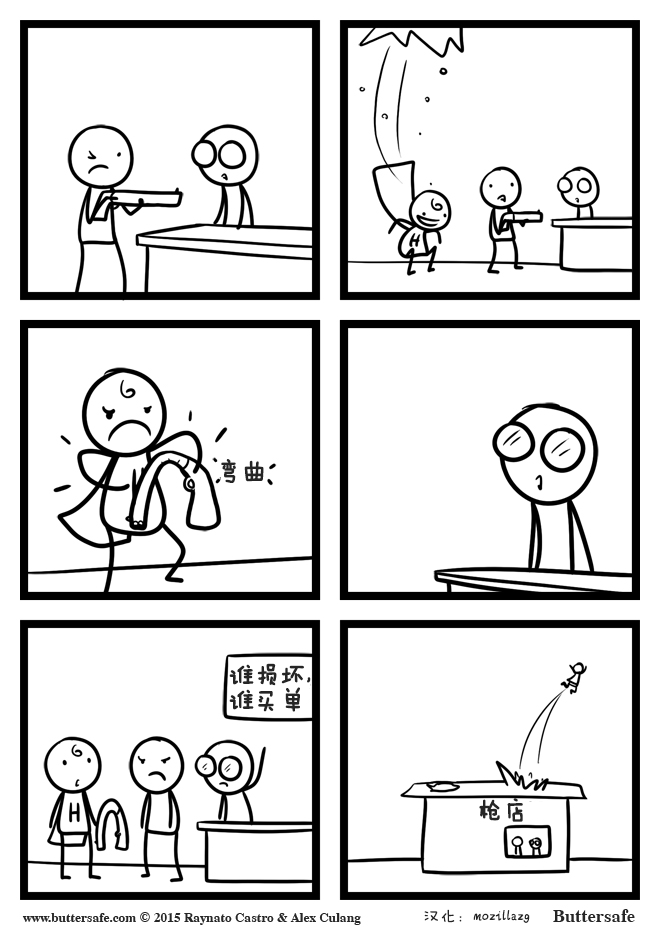
<style>
.page{position:relative;width:660px;height:936px;background:#ffffff}
.page>*{position:absolute;margin:0}
.t1{font:25px "FZMWJW--GB1-0";color:#252525;font-weight:bold}
.t2{font:25px/25px "FZMWJW--GB1-0";color:#252525;font-weight:bold}
.t3{font:16.7px "FZMWJW--GB1-0";color:#252525}
</style>
<div class="page">
<p class="t1" style="left:221px;top:459px;width:43px;height:24px">弯曲</p>
<p class="t2" style="left:229px;top:663px;width:82px;height:49px">谁损坏，<br>谁买单</p>
<p class="t1" style="left:479px;top:798px;width:44px;height:24px">枪店</p>
<p class="t3" style="left:424px;top:909px;width:106px;height:14px">汉化：mozillazg</p>
</div>
